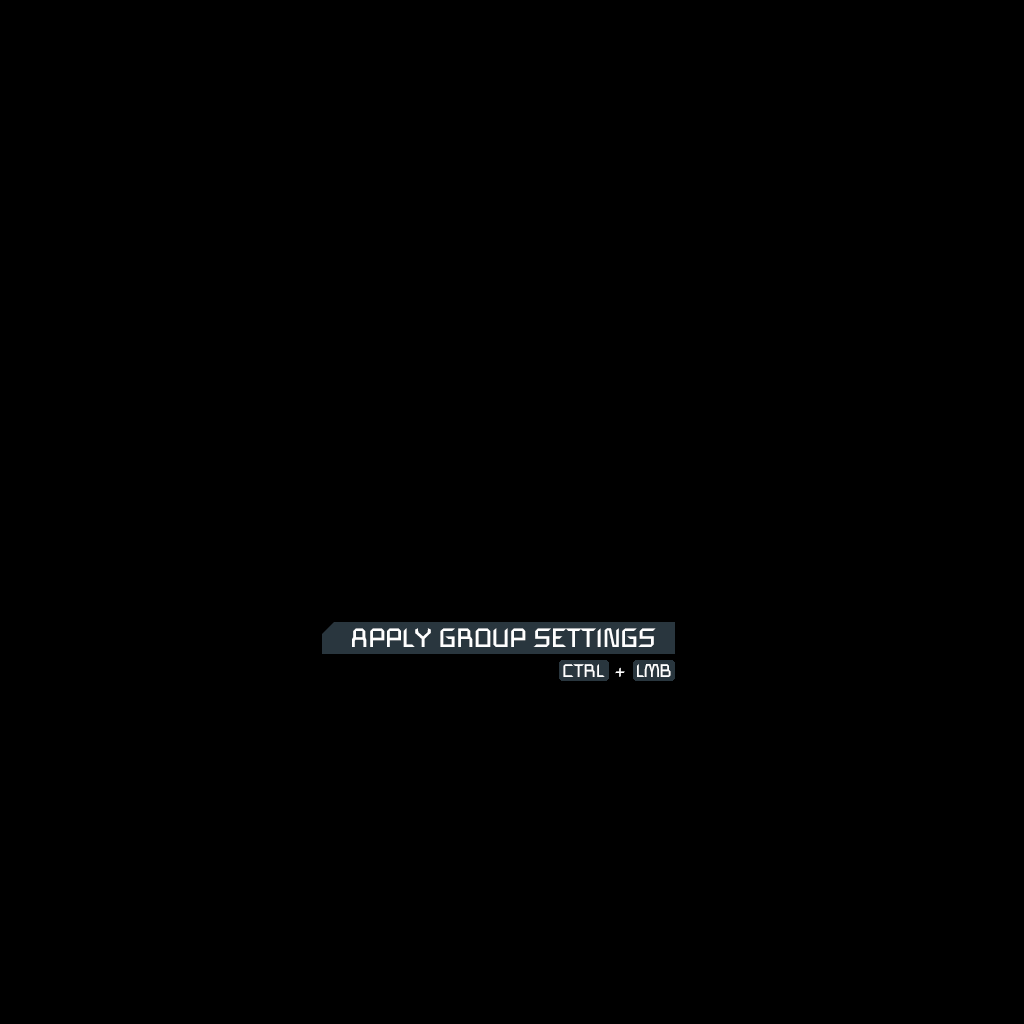
<style>
.page{position:relative;width:1024px;height:1024px;background:#000000}
.page>*{position:absolute;margin:0}
.t1{font:26px "SpaceEngineers";color:#ffffff}
.t2{font:18px "SpaceEngineers";color:#ffffff}
</style>
<div class="page">
<p class="t1" style="left:352px;top:628px;width:304px;height:19px">APPLY GROUP SETTINGS</p>
<p class="t2" style="left:563px;top:664px;width:108px;height:13px">CTRL  +  LMB</p>
</div>
